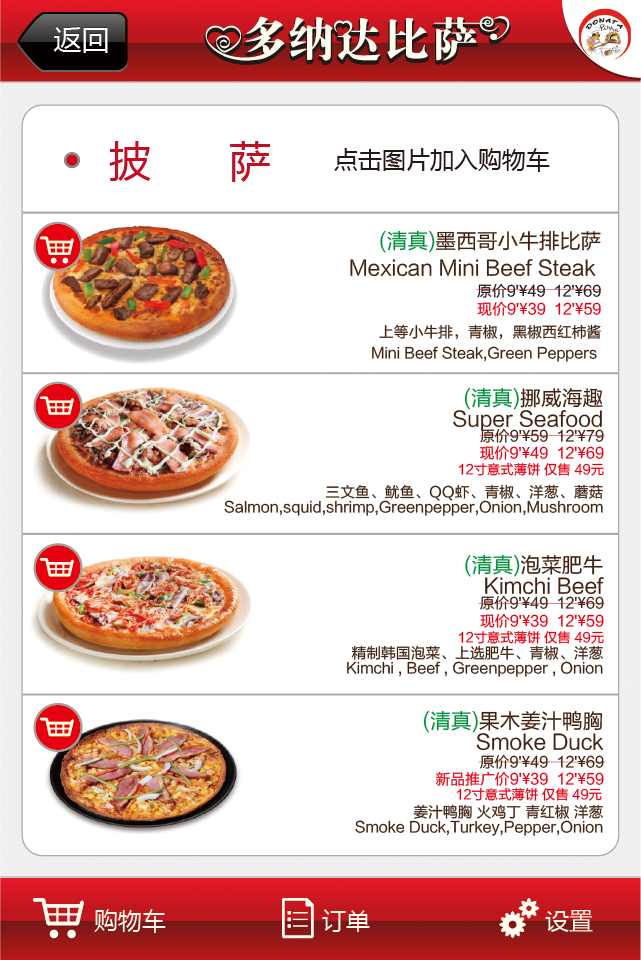
<style>
.page{position:relative;width:641px;height:960px;background:#ffffff}
.page>*{position:absolute;margin:0}
.t1{font:28px "MicrosoftYaHei"}
.t2{font:28px "MicrosoftYaHei";color:#ffffff}
.t3{font:42px "MicrosoftYaHei";color:#c30d23}
.t4{font:24px "MicrosoftYaHei";color:#231815}
.t5{font:14.8px/20.7px "FZLTHK--GBK1-0";color:#40220f}
.t6{font:20.7px/20.7px "FZLTHK--GBK1-0";color:#00913a}
.t7{font:20.7px/20.7px "FZLTHK--GBK1-0";color:#40220f}
.t8{font:14.8px "FZLTHK--GBK1-0";color:#231815}
.t9{font:14.8px "MicrosoftYaHei";color:#231815}
.t10{font:14.8px "FZLTHK--GBK1-0";color:#e60012}
.t11{font:14.8px "MicrosoftYaHei";color:#e60012}
.t12{font:14.9px/14.9px "FZLTHK--GBK1-0";color:#40220f}
.t13{font:20.8px/20.8px "FZLTHK--GBK1-0";color:#00913a}
.t14{font:20.8px/20.8px "FZLTHK--GBK1-0";color:#40220f}
.t15{font:13.3px "FZLTHK--GBK1-0";color:#e60012}
.t16{font:14.8px "FZLTHK--GBK1-0";color:#40220f}
.t17{font:14.8px "MicrosoftYaHei";color:#40220f}
.t18{font:14.8px/14.8px "FZLTHK--GBK1-0";color:#40220f}
.t19{font:24px "MicrosoftYaHei";color:#fffeee}
</style>
<div class="page">
<p class="t1" style="left:53px;top:26px;width:55px;height:26px">返回</p>
<p class="t2" style="left:53px;top:27px;width:55px;height:26px">返回</p>
<p class="t3" style="left:109px;top:141px;width:162px;height:41px">披 萨</p>
<p class="t4" style="left:334px;top:148px;width:216px;height:24px">点击图片加入购物车</p>
<p class="t5" style="left:350px;top:230px;width:251px;height:132px;text-align:right"><span class="t6">(清真)</span><span class="t7">墨西哥小牛排比萨<br>Mexican Mini Beef Steak <br><br><br></span>上等小牛排，青椒，黑椒西红柿酱<br>Mini Beef Steak,Green Peppers</p>
<p class="t8" style="left:477px;top:283px;width:124px;height:33px;text-align:right">原价9'<span class="t9">¥</span>49  12'<span class="t9">¥</span>69<br><span class="t10">现价9'</span><span class="t11">¥</span><span class="t10">39  12'</span><span class="t11">¥</span><span class="t10">59</span></p>
<p class="t12" style="left:224px;top:387px;width:379px;height:129px;text-align:right"><span class="t13">(清真)</span><span class="t14">挪威海趣<br>Super Seafood<br><br><br></span><br>三文鱼、鱿鱼、QQ虾、青椒、洋葱、蘑菇<br>Salmon,squid,shrimp,Greenpepper,Onion,Mushroom</p>
<p class="t15" style="left:458px;top:428px;width:146px;height:48px;text-align:right"><span class="t16">原价9'</span><span class="t17">¥</span><span class="t16">59  12'</span><span class="t17">¥</span><span class="t16">79<br></span><span class="t10">现价9'</span><span class="t11">¥</span><span class="t10">49  12'</span><span class="t11">¥</span><span class="t10">69<br></span>12寸意式薄饼 仅售 49元</p>
<p class="t18" style="left:347px;top:554px;width:257px;height:123px;text-align:right"><span class="t6">(清真)</span><span class="t7">泡菜肥牛<br>Kimchi Beef<br><br><br><br></span>精制韩国泡菜、上选肥牛、青椒、洋葱<br>Kimchi , Beef , Greenpepper , Onion</p>
<p class="t15" style="left:458px;top:595px;width:146px;height:49px;text-align:right"><span class="t16">原价9'</span><span class="t17">¥</span><span class="t16">49  12'</span><span class="t17">¥</span><span class="t16">69<br></span><span class="t10">现价9'</span><span class="t11">¥</span><span class="t10">39  12'</span><span class="t11">¥</span><span class="t10">59<br></span>12寸意式薄饼 仅售 49元</p>
<p class="t5" style="left:355px;top:710px;width:249px;height:126px;text-align:right"><span class="t6">(清真)</span><span class="t7">果木姜汁鸭胸<br>Smoke Duck<br><br><br></span>姜汁鸭胸 火鸡丁 青红椒 洋葱<br>Smoke Duck,Turkey,Pepper,Onion</p>
<p class="t16" style="left:435px;top:754px;width:169px;height:32px;text-align:right">原价9'<span class="t17">¥</span>49  12'<span class="t17">¥</span>69<br><span class="t10">新品推广价9'</span><span class="t11">¥</span><span class="t10">39  12'</span><span class="t11">¥</span><span class="t10">59</span></p>
<p class="t15" style="left:456px;top:787px;width:146px;height:14px">12寸意式薄饼 仅售 49元</p>
<p class="t19" style="left:94px;top:909px;width:72px;height:24px">购物车</p>
<p class="t19" style="left:322px;top:909px;width:48px;height:23px">订单</p>
<p class="t19" style="left:545px;top:910px;width:48px;height:22px">设置</p>
</div>
